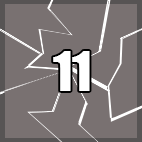
<style>
.page{position:relative;width:142px;height:142px;background:#797171}
.page>*{position:absolute;margin:0}
.t1{font:51px "Impact";color:#ffffff}
</style>
<div class="page">
<p class="t1" style="left:53px;top:51px;width:37px;height:40px">11</p>
</div>
